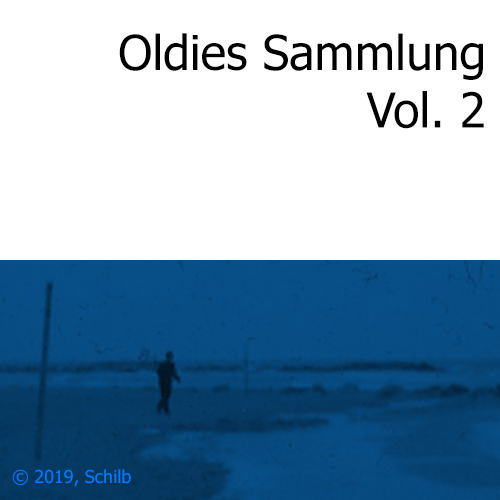
<style>
.page{position:relative;width:500px;height:500px;background:#ffffff}
.page>*{position:absolute;margin:0}
.t1{font:48px "Tahoma";color:#000000}
.t2{font:18px "Tahoma";color:#0078ff}
</style>
<div class="page">
<p class="t1" style="left:119px;top:33px;width:365px;height:96px;text-align:right">Oldies Sammlung<br>Vol. 2</p>
<p class="t2" style="left:12px;top:469px;width:119px;height:18px">© 2019, Schilb</p>
</div>
